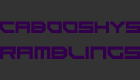
<style>
.page{position:relative;width:140px;height:80px;background:#333333}
.page>*{position:absolute;margin:0}
.t1{font:22.9px "Goteki-45";color:#32004b}
.t2{font:24.9px "Goteki-45";color:#32004b}
</style>
<div class="page">
<p class="t1" style="left:0px;top:21px;width:141px;height:12px">Cabooshys</p>
<p class="t2" style="left:0px;top:46px;width:141px;height:13px">Ramblings</p>
</div>
